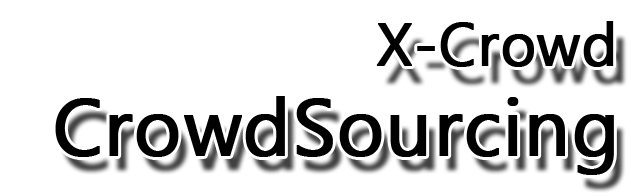
<style>
.page{position:relative;width:631px;height:196px;background:#ffffff}
.page>*{position:absolute;margin:0}
.t1{font:60px "KhmerUI";color:#000000;font-weight:bold}
.t2{font:80px "KhmerUI";color:#010101;font-weight:bold}
</style>
<div class="page">
<p class="t1" style="left:376px;top:21px;width:238px;height:46px">X-Crowd</p>
<p class="t2" style="left:55px;top:96px;width:559px;height:79px">CrowdSourcing</p>
</div>
